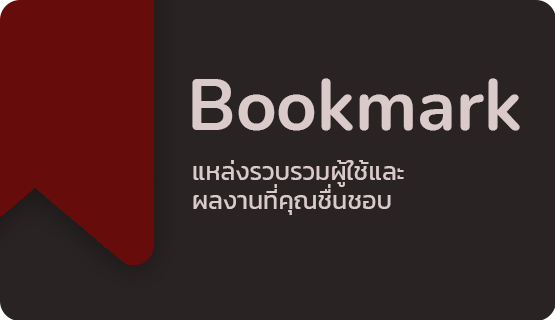
<style>
.page{position:relative;width:555px;height:320px;background:#292323}
.page>*{position:absolute;margin:0}
.t1{font:70.8px "Nunito-Bold";color:#dbcaca}
.t2{font:25px/29.2px "Kanit-Regular";color:#dbcaca}
</style>
<div class="page">
<p class="t1" style="left:192px;top:78px;width:328px;height:53px">Bookmark</p>
<p class="t2" style="left:193px;top:160px;width:211px;height:55px">แหล่งรวบรวมผู้ใช้และ<br>ผลงานที่คุณชื่นชอบ</p>
</div>
